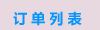
<style>
.page{position:relative;width:100px;height:30px;background:#e8d8e0}
.page>*{position:absolute;margin:0}
.t1{font:14px "MicrosoftYaHei-Bold";color:#0696fb}
</style>
<div class="page">
<p class="t1" style="left:13px;top:11px;width:69px;height:15px">订 单 列 表</p>
</div>
